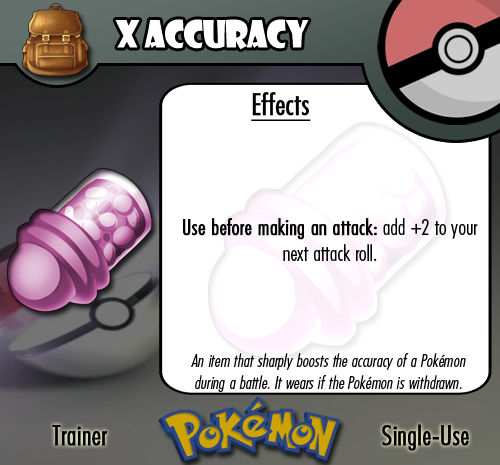
<style>
.page{position:relative;width:500px;height:465px;background:#ffffff}
.page>*{position:absolute;margin:0}
.t1{font:36.7px "ShowcardGothic-Reg";letter-spacing:-0.025em;color:#ffffff;scale:0.91 1}
.t2{font:22.2px "FuturaCondensedBQ-Light";color:#010101}
.t3{font:27.8px "FuturaCondensedBQ-Light";color:#010101;font-weight:bold}
.t4{font:30.6px "FuturaCondensedBQ-Light";color:#010101;font-weight:bold;text-decoration:underline}
.t5{font:22.2px "FuturaCondensedBQ-Light";color:#010101;font-weight:bold}
.t6{font:18.1px "FuturaCondensedBQ-Light";color:#010101;font-style:italic}
</style>
<div class="page">
<p class="t1" style="left:115px;top:19px;width:194px;height:31px">X accuracy</p>
<p class="t2" style="left:183px;top:92px;width:295px;height:169px"><span class="t3">  </span><span class="t4">Effects<br><br><br><br><br><br><br><br></span><span class="t5">Use before making an attack: </span>add +2 to your next attack roll.</p>
<p class="t6" style="left:191px;top:353px;width:275px;height:39px;text-align:center">An item that sharply boosts the accuracy of a Pokémon during a battle. It wears if the Pokémon is withdrawn.</p>
<p class="t3" style="left:52px;top:425px;width:55px;height:21px">Trainer</p>
<p class="t3" style="left:382px;top:424px;width:87px;height:27px">Single-Use</p>
</div>
